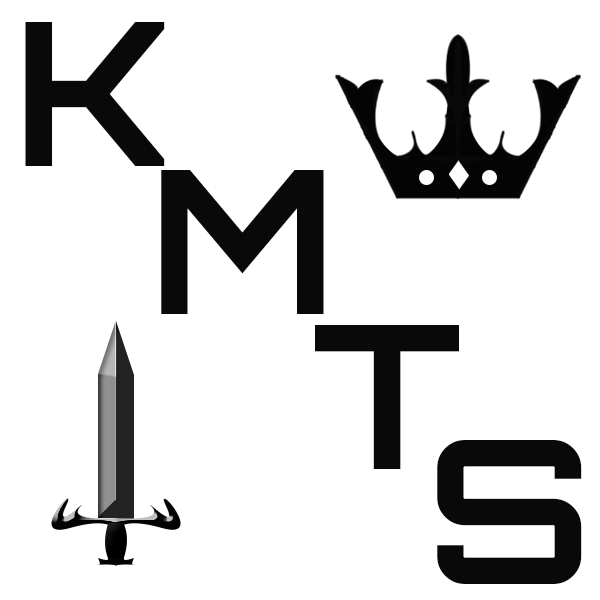
<style>
.page{position:relative;width:600px;height:600px;background:#ffffff}
.page>*{position:absolute;margin:0}
.t1{font:200px "Orbitron-Bold";color:#090909}
</style>
<div class="page">
<p class="t1" style="left:25px;top:22px;width:140px;height:144px">K</p>
<p class="t1" style="left:161px;top:170px;width:163px;height:144px">M</p>
<p class="t1" style="left:315px;top:325px;width:144px;height:144px">T</p>
<p class="t1" style="left:437px;top:440px;width:145px;height:144px">S</p>
</div>
